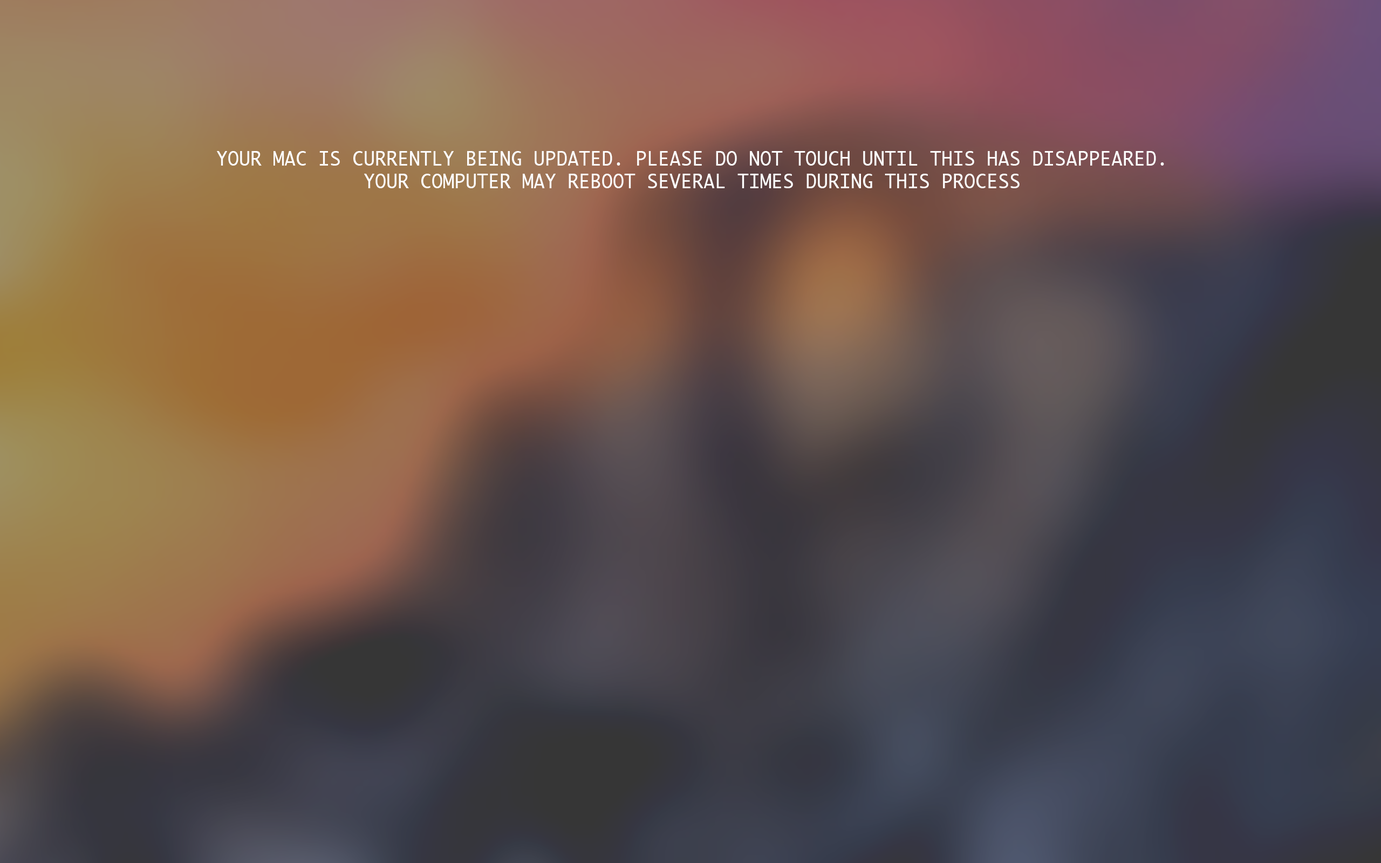
<style>
.page{position:relative;width:1381px;height:863px}
.page>*{position:absolute;margin:0}
.t1{font:18.9px "Monaco";color:#ffffff}
</style>
<div class="page">
<p class="t1" style="left:217px;top:151px;width:947px;height:37px;text-align:center">YOUR MAC IS CURRENTLY BEING UPDATED. PLEASE DO NOT TOUCH UNTIL THIS HAS DISAPPEARED.<br>YOUR COMPUTER MAY REBOOT SEVERAL TIMES DURING THIS PROCESS</p>
</div>
